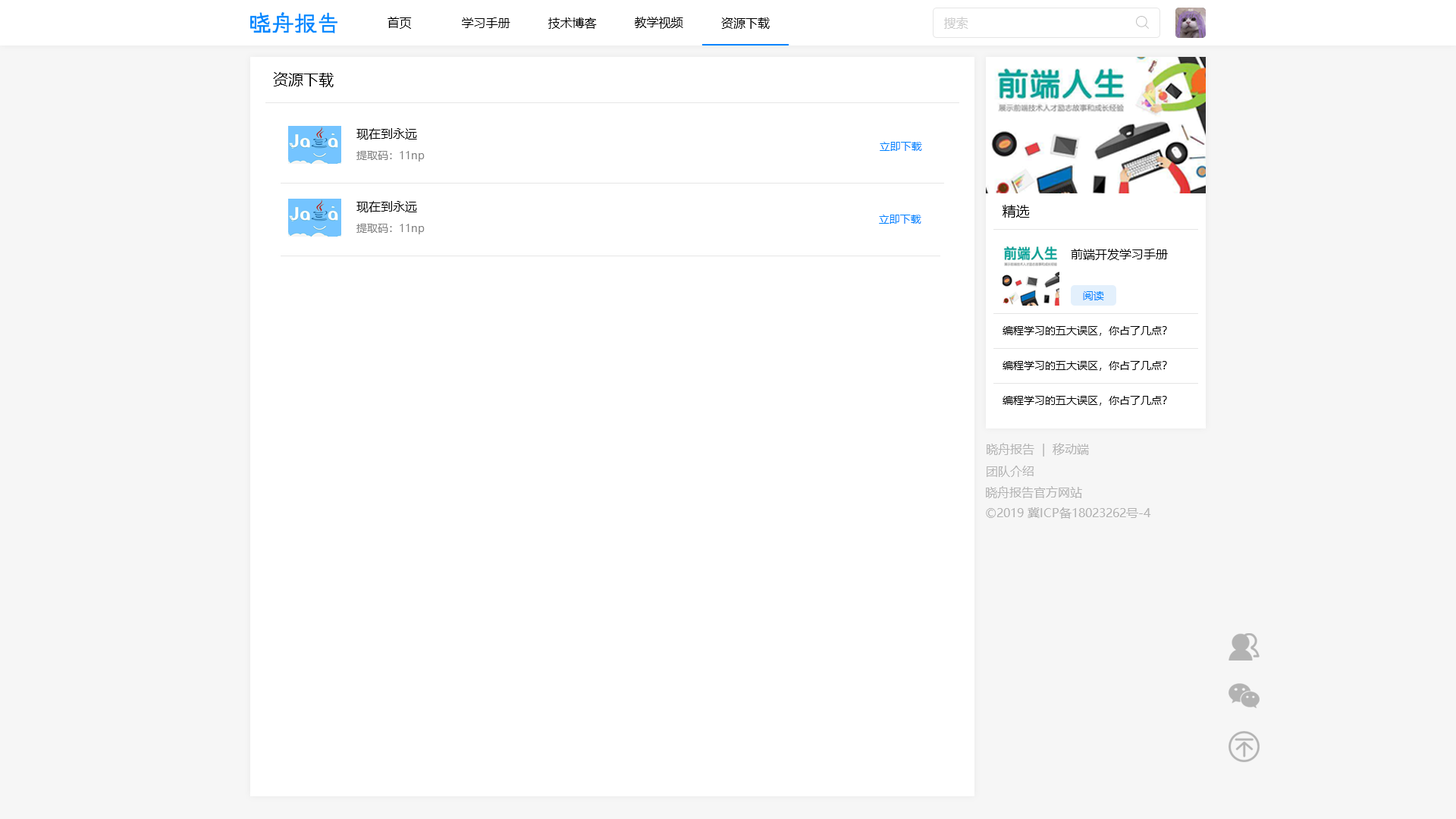
<style>
.page{position:relative;width:1456px;height:819px;background:#ffffff}
.page>*{position:absolute;margin:0}
.t1{font:12.1px "MicrosoftYaHei";color:#000000}
.t2{font:12.1px "MicrosoftYaHei";color:#cccccc}
.t3{font:15.2px "MicrosoftYaHei";color:#000000}
.t4{font:10.6px "MicrosoftYaHei";color:#0084ff}
.t5{font:10.6px "MicrosoftYaHei";color:#808080}
.t6{font:13.6px "MicrosoftYaHei";color:#000000}
.t7{font:10.6px "MicrosoftYaHei";color:#000000}
.t8{font:12.1px "MicrosoftYaHei";color:#b3b3b3}
</style>
<div class="page">
<p class="t1" style="left:388px;top:17px;width:24px;height:12px">首页</p>
<p class="t1" style="left:462px;top:17px;width:48px;height:11px">学习手册</p>
<p class="t1" style="left:548px;top:17px;width:49px;height:12px">技术博客</p>
<p class="t1" style="left:635px;top:17px;width:48px;height:12px">教学视频</p>
<p class="t1" style="left:721px;top:17px;width:49px;height:12px">资源下载</p>
<p class="t2" style="left:944px;top:17px;width:24px;height:12px">搜索</p>
<p class="t3" style="left:273px;top:72px;width:61px;height:15px">资源下载</p>
<p class="t1" style="left:356px;top:128px;width:61px;height:12px">现在到永远</p>
<p class="t4" style="left:880px;top:142px;width:42px;height:9px">立即下载</p>
<p class="t5" style="left:356px;top:151px;width:69px;height:11px">提取码：11np</p>
<p class="t1" style="left:356px;top:201px;width:61px;height:11px">现在到永远</p>
<p class="t6" style="left:1003px;top:205px;width:27px;height:13px">精选</p>
<p class="t4" style="left:879px;top:215px;width:42px;height:9px">立即下载</p>
<p class="t5" style="left:356px;top:224px;width:69px;height:10px">提取码：11np</p>
<p class="t1" style="left:1071px;top:249px;width:97px;height:11px">前端开发学习手册</p>
<p class="t4" style="left:1083px;top:291px;width:21px;height:9px">阅读</p>
<p class="t7" style="left:1003px;top:326px;width:164px;height:10px">编程学习的五大误区，你占了几点？</p>
<p class="t7" style="left:1003px;top:361px;width:164px;height:10px">编程学习的五大误区，你占了几点？</p>
<p class="t7" style="left:1003px;top:396px;width:164px;height:10px">编程学习的五大误区，你占了几点？</p>
<p class="t8" style="left:987px;top:443px;width:102px;height:14px">晓舟报告  |  移动端</p>
<p class="t8" style="left:987px;top:466px;width:47px;height:11px">团队介绍</p>
<p class="t8" style="left:986px;top:486px;width:96px;height:12px">晓舟报告官方网站</p>
<p class="t8" style="left:986px;top:507px;width:165px;height:12px">©2019 冀ICP备18023262号-4</p>
</div>
